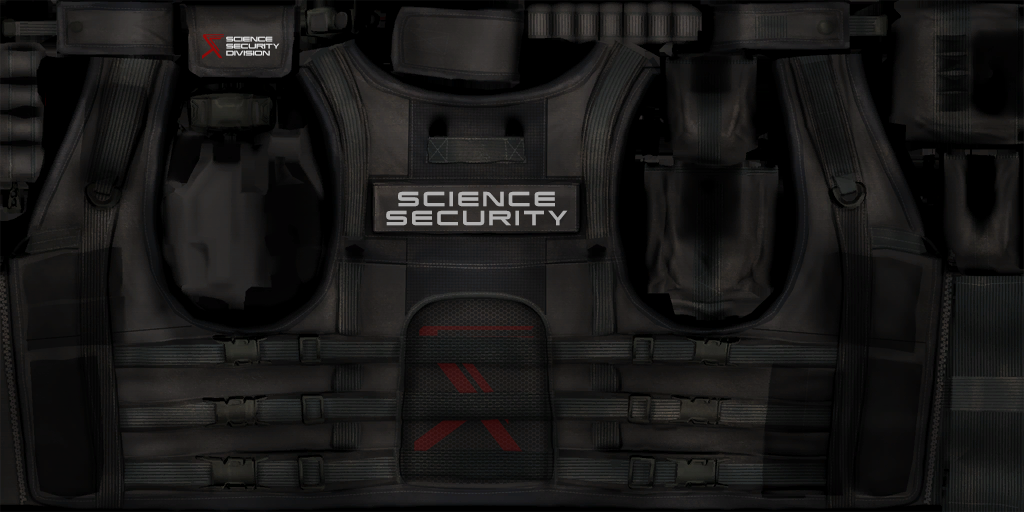
<style>
.page{position:relative;width:1024px;height:512px}
.page>*{position:absolute;margin:0}
.t1{font:6px/7px "MassEffect123";color:#e0e0e0;font-variant:small-caps}
.t2{font:18px/19px "MassEffect123";letter-spacing:0.18em;color:#aeadac;font-variant:small-caps}
</style>
<div class="page">
<p class="t1" style="left:226px;top:36px;width:54px;height:20px">SCIENCE <br>SECURITY<br>DIVISION</p>
<p class="t2" style="left:386px;top:191px;width:182px;height:35px;text-align:center">SCIENCE<br>SECURITY</p>
</div>
